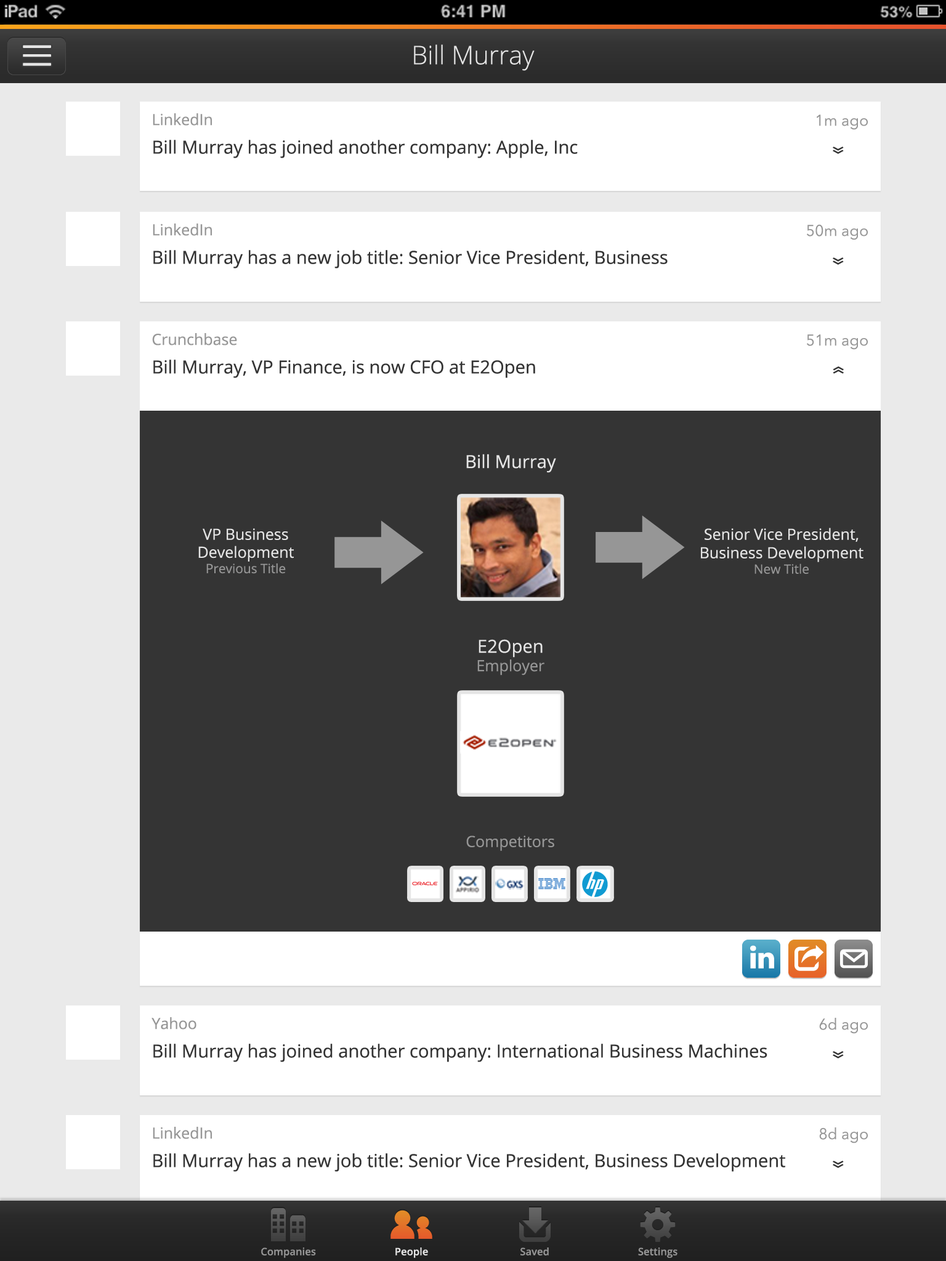
<style>
.page{position:relative;width:946px;height:1261px;background:#ffffff}
.page>*{position:absolute;margin:0}
.t1{font:25.7px "OpenSans-Light";color:#e5e5e5}
.t2{font:18px "OpenSans";color:#343434}
.t3{font:15.4px "OpenSans";color:#969696}
.t4{font:15.4px "AvenirNext-Regular";color:#969696}
.t5{font:25.7px "OpenSans";color:#343434;scale:0.64 1}
.t6{font:18px "OpenSans";color:#e5e5e5}
.t7{font:12.8px "OpenSans";color:#969696}
.t8{font:15.4px "OpenSans";color:#e5e5e5}
.t9{font:15.4px/18px "OpenSans";color:#e5e5e5}
.t10{font:10.3px "OpenSans-Semibold";color:#969696}
.t11{font:10.3px "OpenSans-Semibold";color:#e5e5e5}
</style>
<div class="page">
<p class="t1" style="left:414px;top:44px;width:120px;height:27px">Bill Murray</p>
<p class="t2" style="left:153px;top:113px;width:425px;height:45px"><span class="t3">LinkedIn<br></span>Bill Murray has joined another company: Apple, Inc</p>
<p class="t4" style="left:816px;top:115px;width:51px;height:15px">1m ago</p>
<p class="t5" style="left:832px;top:147px;width:11px;height:7px;rotate:90deg">»</p>
<p class="t2" style="left:153px;top:223px;width:514px;height:45px"><span class="t3">LinkedIn<br></span>Bill Murray has a new job title: Senior Vice President, Business Development</p>
<p class="t4" style="left:807px;top:224px;width:60px;height:16px">50m ago</p>
<p class="t5" style="left:832px;top:257px;width:11px;height:8px;rotate:90deg">»</p>
<p class="t2" style="left:152px;top:333px;width:383px;height:45px"><span class="t3">Crunchbase<br></span>Bill Murray, VP Finance, is now CFO at E2Open</p>
<p class="t4" style="left:807px;top:334px;width:60px;height:16px">51m ago</p>
<p class="t5" style="left:832px;top:366px;width:11px;height:8px;rotate:-90deg">»</p>
<p class="t6" style="left:466px;top:454px;width:90px;height:19px">Bill Murray</p>
<p class="t7" style="left:198px;top:528px;width:96px;height:46px;text-align:center"><span class="t8">VP Business <br></span><span class="t9">Development<br></span>Previous Title</p>
<p class="t8" style="left:701px;top:528px;width:162px;height:46px;text-align:center">Senior Vice President,<br>Business Development<br><span class="t7">New Title</span></p>
<p class="t3" style="left:477px;top:639px;width:67px;height:36px;text-align:center"><span class="t6">E2Open<br></span>Employer</p>
<p class="t3" style="left:466px;top:835px;width:88px;height:16px">Competitors</p>
<p class="t2" style="left:151px;top:1017px;width:616px;height:45px"><span class="t3">Yahoo<br></span>Bill Murray has joined another company: International Business Machines</p>
<p class="t4" style="left:819px;top:1018px;width:48px;height:16px">6d ago</p>
<p class="t5" style="left:832px;top:1051px;width:11px;height:7px;rotate:90deg">»</p>
<p class="t2" style="left:153px;top:1127px;width:632px;height:45px"><span class="t3">LinkedIn<br></span>Bill Murray has a new job title: Senior Vice President, Business Development</p>
<p class="t4" style="left:819px;top:1127px;width:48px;height:16px">8d ago</p>
<p class="t5" style="left:832px;top:1161px;width:11px;height:7px;rotate:90deg">»</p>
<p class="t10" style="left:261px;top:1247px;width:55px;height:11px">Companies</p>
<p class="t11" style="left:395px;top:1247px;width:33px;height:11px">People</p>
<p class="t10" style="left:520px;top:1247px;width:29px;height:8px">Saved</p>
<p class="t10" style="left:638px;top:1247px;width:39px;height:11px">Settings</p>
</div>
